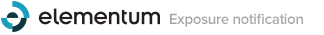
<style>
.page{position:relative;width:324px;height:35px;background:#ffffff}
.page>*{position:absolute;margin:0}
.t1{font:15px "ProximaNova-Semibold";letter-spacing:-0.022em;color:#a6a5a5}
</style>
<div class="page">
<p class="t1" style="left:170px;top:13px;width:133px;height:14px">Exposure notification</p>
</div>
